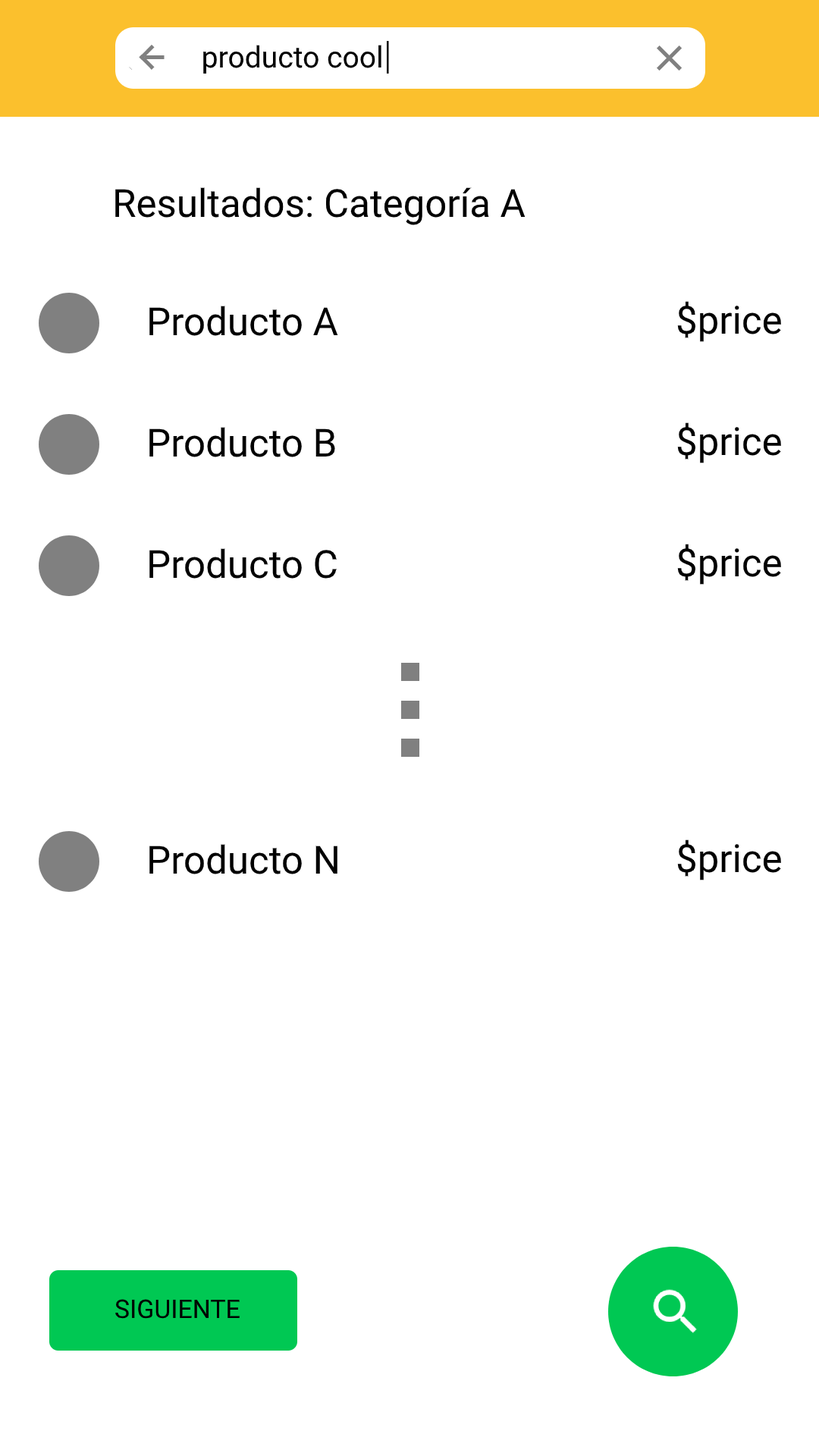
<style>
.page{position:relative;width:819px;height:1456px;background:#ffffff}
.page>*{position:absolute;margin:0}
.t1{font:29.6px "Roboto-Regular";color:#000000}
.t2{font:38.7px "Roboto-Regular";color:#000000}
</style>
<div class="page">
<p class="t1" style="left:203px;top:45px;width:178px;height:29px">producto cool</p>
<p class="t2" style="left:115px;top:187px;width:411px;height:38px">Resultados: Categoría A</p>
<p class="t2" style="left:149px;top:306px;width:189px;height:30px">Producto A</p>
<p class="t2" style="left:677px;top:301px;width:104px;height:41px">$price</p>
<p class="t2" style="left:677px;top:422px;width:104px;height:41px">$price</p>
<p class="t2" style="left:149px;top:427px;width:186px;height:30px">Producto B</p>
<p class="t2" style="left:677px;top:544px;width:104px;height:41px">$price</p>
<p class="t2" style="left:149px;top:548px;width:188px;height:31px">Producto C</p>
<p class="t2" style="left:149px;top:844px;width:188px;height:30px">Producto N</p>
<p class="t2" style="left:677px;top:839px;width:104px;height:41px">$price</p>
</div>
